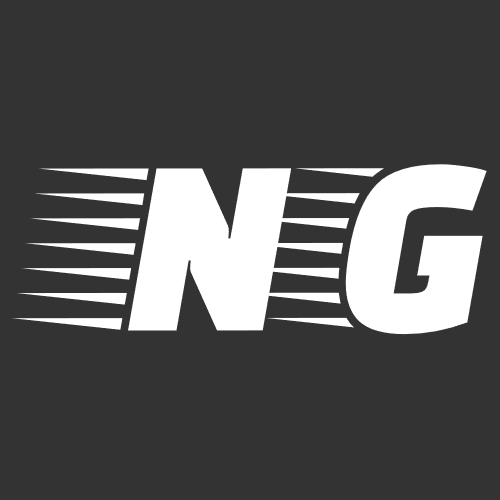
<style>
.page{position:relative;width:500px;height:500px;background:#333333}
.page>*{position:absolute;margin:0}
.t1{font:259.3px "FasterOne-Regular";color:#ffffff}
</style>
<div class="page">
<p class="t1" style="left:12px;top:164px;width:475px;height:171px">NG</p>
</div>
